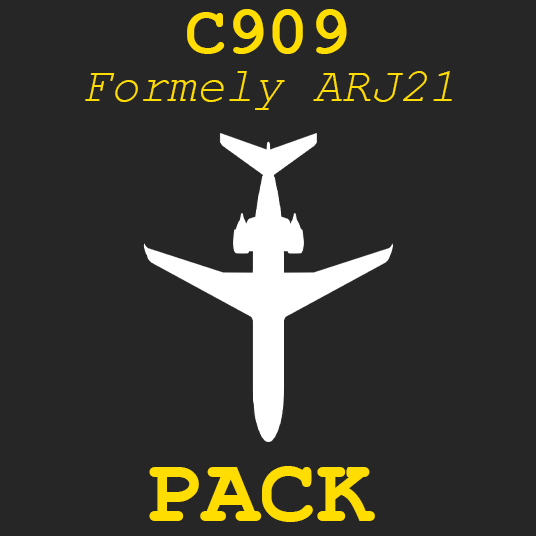
<style>
.page{position:relative;width:536px;height:536px;background:#262626}
.page>*{position:absolute;margin:0}
.t1{font:68.7px "CourierNewPS-BoldMT";color:#ffdd00}
.t2{font:48.2px "CourierNewPS-ItalicMT";color:#ffdd00}
.t3{font:95.3px "CourierNewPS-BoldMT";color:#ffdd00}
</style>
<div class="page">
<p class="t1" style="left:187px;top:9px;width:160px;height:45px">C909</p>
<p class="t2" style="left:85px;top:71px;width:367px;height:39px">Formely ARJ21</p>
<p class="t3" style="left:149px;top:466px;width:226px;height:56px">PACK</p>
</div>
